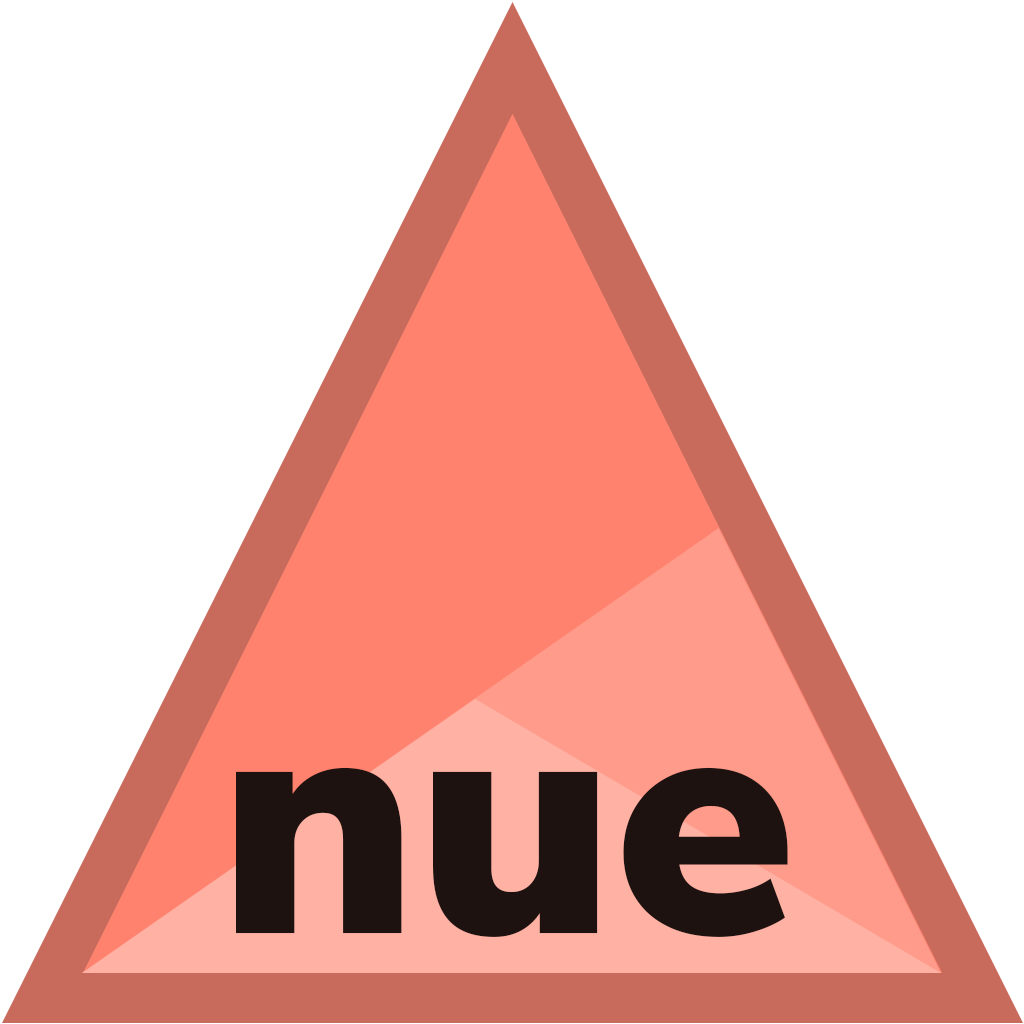
<style>
.page{position:relative;width:1024px;height:1024px;background:#ffffff}
.page>*{position:absolute;margin:0}
.t1{font:327.4px "NunitoSans-Black";color:#1e1210}
</style>
<div class="page">
<p class="t1" style="left:236px;top:767px;width:552px;height:170px">nue</p>
</div>
